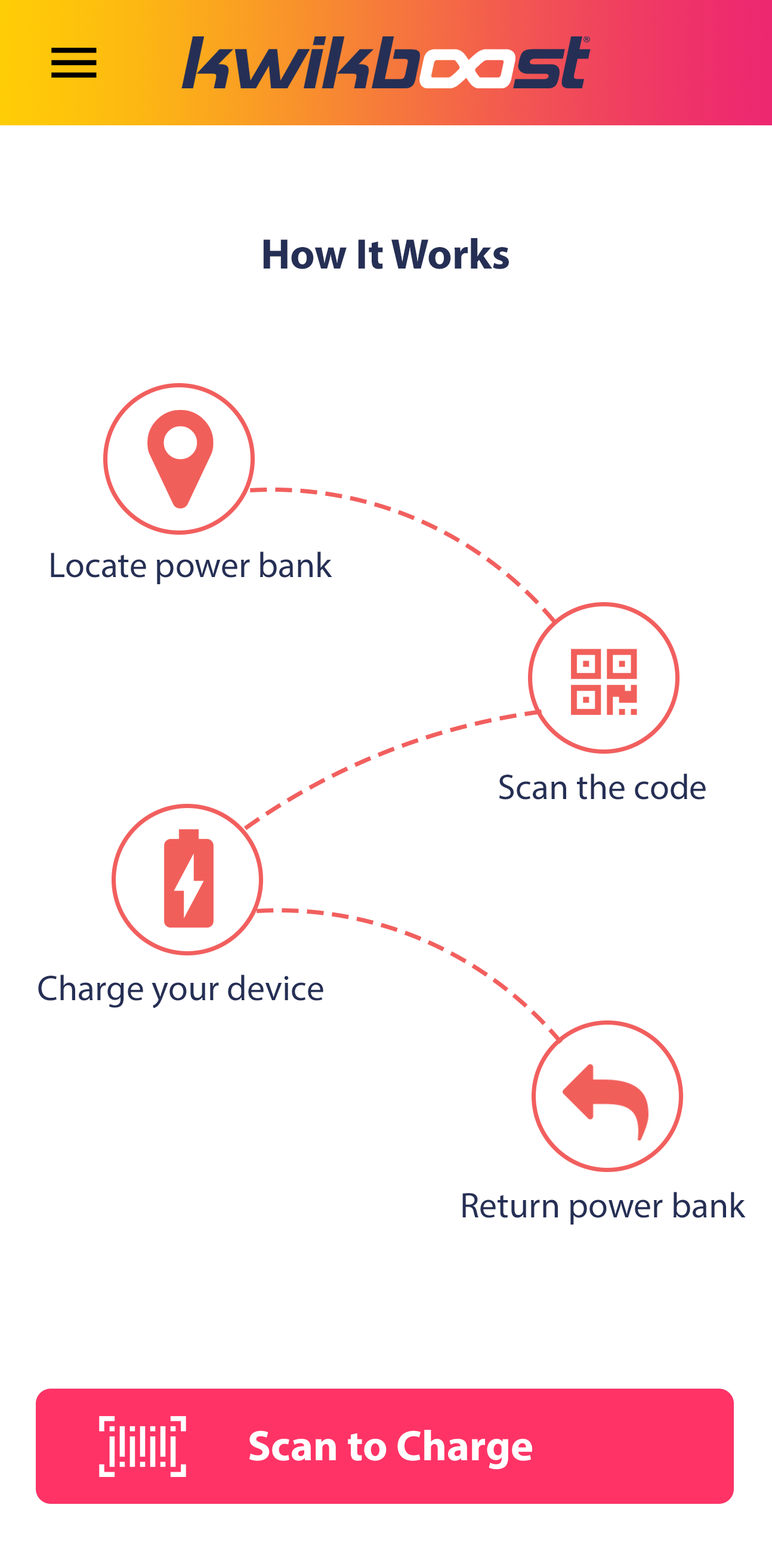
<style>
.page{position:relative;width:772px;height:1545px;background:#ffffff}
.page>*{position:absolute;margin:0}
.t1{font:43px "MyriadPro-Bold";color:#252f55}
.t2{font:35.8px "MyriadPro-Regular";color:#252f55}
.t3{font:43px "MyriadPro-Bold";color:#ffffff}
</style>
<div class="page">
<p class="t1" style="left:263px;top:238px;width:246px;height:31px">How It Works</p>
<p class="t2" style="left:51px;top:551px;width:281px;height:33px">Locate power bank</p>
<p class="t2" style="left:499px;top:773px;width:207px;height:26px">Scan the code</p>
<p class="t2" style="left:38px;top:974px;width:285px;height:34px">Charge your device</p>
<p class="t2" style="left:462px;top:1191px;width:284px;height:33px">Return power bank</p>
<p class="t3" style="left:249px;top:1429px;width:283px;height:40px">Scan to Charge</p>
</div>
